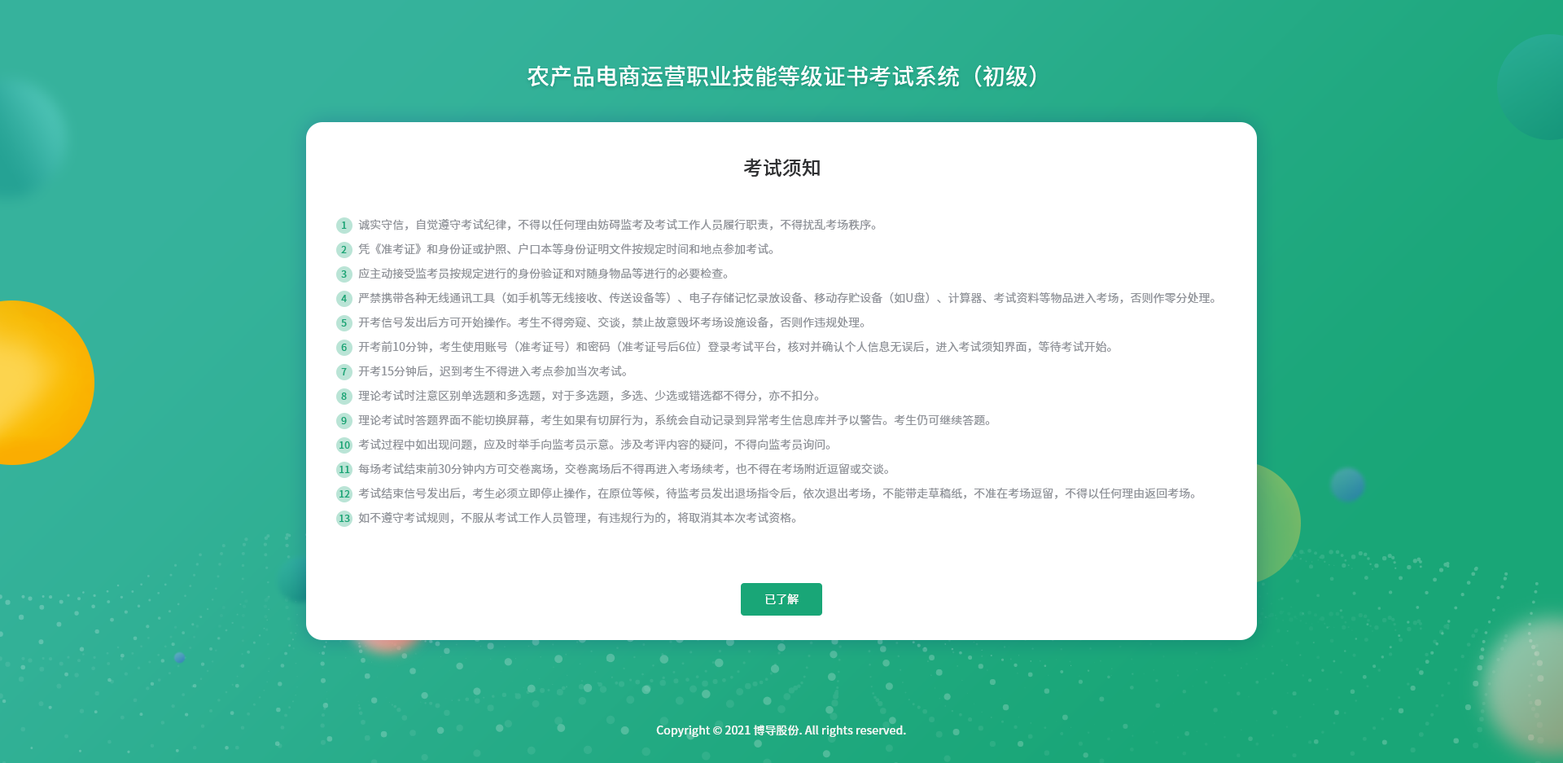
<style>
.page{position:relative;width:1563px;height:763px;background:#ffffff}
.page>*{position:absolute;margin:0}
.t1{font:22.8px "SourceHanSansCN-Medium";color:#ffffff}
.t2{font:19.5px "SourceHanSansCN-Medium";color:#303133;text-transform:uppercase}
.t3{font:9.8px "SourceHanSansCN-Medium";color:#19a677}
.t4{font:11.4px/24.4px "SourceHanSansCN-Regular";color:#909399}
.t5{font:11.4px "SourceHanSansCN-Normal";color:#ffffff}
.t6{font:11.4px "SourceHanSansCN-Medium";color:#ffffff}
</style>
<div class="page">
<p class="t1" style="left:527px;top:65px;width:509px;height:22px">农产品电商运营职业技能等级证书考试系统（初级）</p>
<p class="t2" style="left:744px;top:158px;width:76px;height:19px">考试须知</p>
<p class="t3" style="left:342px;top:221px;width:5px;height:8px">1</p>
<p class="t4" style="left:358px;top:218px;width:857px;height:305px">诚实守信，自觉遵守考试纪律，不得以任何理由妨碍监考及考试工作人员履行职责，不得扰乱考场秩序。<br>凭《准考证》和身份证或护照、户口本等身份证明文件按规定时间和地点参加考试。<br>应主动接受监考员按规定进行的身份验证和对随身物品等进行的必要检查。<br>严禁携带各种无线通讯工具（如手机等无线接收、传送设备等）、电子存储记忆录放设备、移动存贮设备（如U盘）、计算器、考试资料等物品进入考场，否则作零分处理。<br>开考信号发出后方可开始操作。考生不得旁窥、交谈，禁止故意毁坏考场设施设备，否则作违规处理。<br>开考前10分钟，考生使用账号（准考证号）和密码（准考证号后6位）登录考试平台，核对并确认个人信息无误后，进入考试须知界面，等待考试开始。<br>开考15分钟后，迟到考生不得进入考点参加当次考试。<br>理论考试时注意区别单选题和多选题，对于多选题，多选、少选或错选都不得分，亦不扣分。<br>理论考试时答题界面不能切换屏幕，考生如果有切屏行为，系统会自动记录到异常考生信息库并予以警告。考生仍可继续答题。<br>考试过程中如出现问题，应及时举手向监考员示意。涉及考评内容的疑问，不得向监考员询问。<br>每场考试结束前30分钟内方可交卷离场，交卷离场后不得再进入考场续考，也不得在考场附近逗留或交谈。<br>考试结束信号发出后，考生必须立即停止操作，在原位等候，待监考员发出退场指令后，依次退出考场，不能带走草稿纸，不准在考场逗留，不得以任何理由返回考场。<br>如不遵守考试规则，不服从考试工作人员管理，有违规行为的，将取消其本次考试资格。</p>
<p class="t3" style="left:341px;top:246px;width:6px;height:7px">2</p>
<p class="t3" style="left:341px;top:270px;width:6px;height:8px">3</p>
<p class="t3" style="left:341px;top:295px;width:6px;height:7px">4</p>
<p class="t3" style="left:341px;top:319px;width:6px;height:7px">5</p>
<p class="t3" style="left:341px;top:344px;width:6px;height:7px">6</p>
<p class="t3" style="left:341px;top:368px;width:6px;height:7px">7</p>
<p class="t3" style="left:341px;top:392px;width:6px;height:8px">8</p>
<p class="t3" style="left:341px;top:417px;width:6px;height:7px">9</p>
<p class="t3" style="left:339px;top:441px;width:11px;height:8px">10</p>
<p class="t3" style="left:339px;top:466px;width:11px;height:7px">11</p>
<p class="t3" style="left:339px;top:490px;width:11px;height:7px">12</p>
<p class="t3" style="left:339px;top:515px;width:11px;height:7px">13</p>
<p class="t5" style="left:765px;top:594px;width:34px;height:11px">已了解</p>
<p class="t6" style="left:656px;top:725px;width:250px;height:12px;opacity:0.88">Copyright © 2021 博导股份. All rights reserved.</p>
</div>
